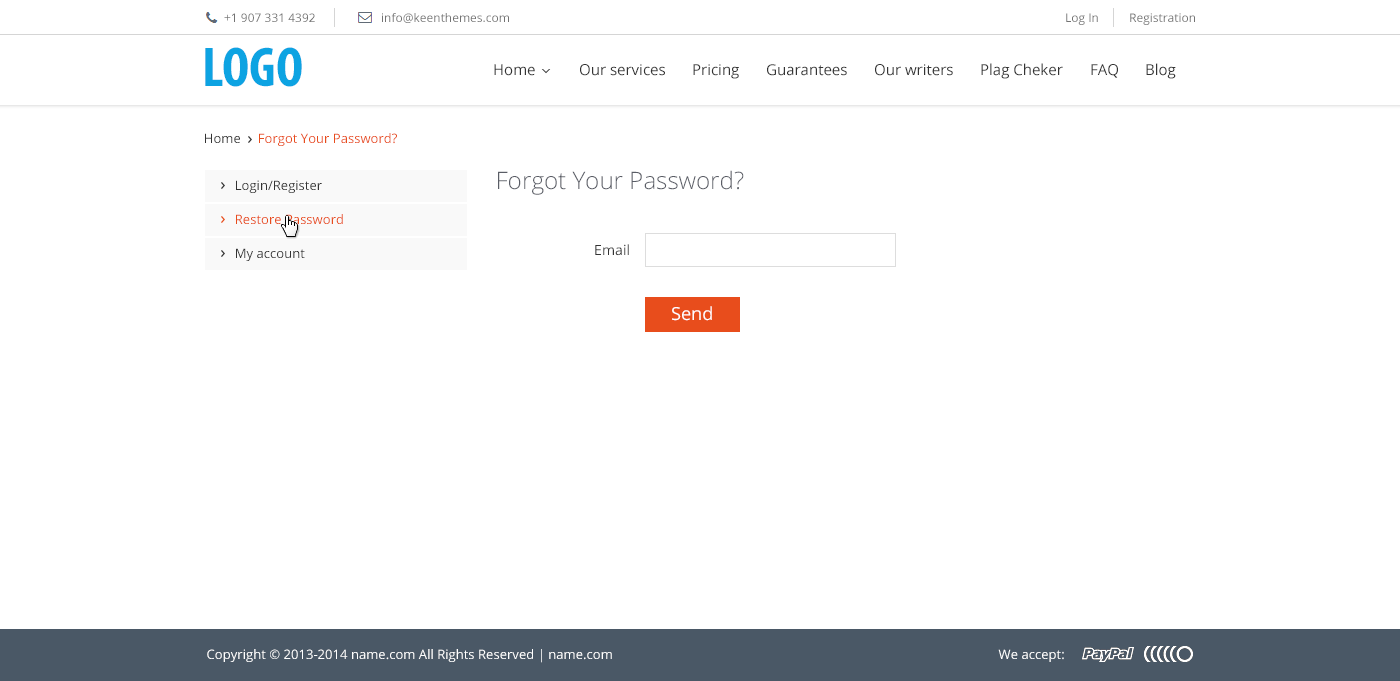
<style>
.page{position:relative;width:1400px;height:681px;background:#ffffff}
.page>*{position:absolute;margin:0}
.t1{font:12px "OpenSans";color:#737373}
.t2{font:56.6px "MyriadPro-BoldCond";color:#0da3e2}
.t3{font:15px "OpenSans";color:#333333}
.t4{font:13px "OpenSans";color:#e84d1c}
.t5{font:13px "OpenSans";color:#333333}
.t6{font:24px "OpenSans-Light";color:#5a5d66}
.t7{font:14px "OpenSans";color:#333333}
.t8{font:18px "OpenSans";color:#ffffff}
</style>
<div class="page">
<p class="t1" style="left:224px;top:13px;width:91px;height:9px">+1 907 331 4392</p>
<p class="t1" style="left:382px;top:13px;width:127px;height:10px">info@keenthemes.com</p>
<p class="t1" style="left:1066px;top:13px;width:32px;height:12px">Log In</p>
<p class="t1" style="left:1130px;top:13px;width:65px;height:12px">Registration</p>
<p class="t2" style="left:205px;top:47px;width:97px;height:40px">LOGO</p>
<p class="t3" style="left:494px;top:64px;width:41px;height:12px">Home</p>
<p class="t3" style="left:580px;top:64px;width:85px;height:12px">Our services</p>
<p class="t3" style="left:693px;top:64px;width:46px;height:15px">Pricing</p>
<p class="t3" style="left:767px;top:64px;width:80px;height:12px">Guarantees</p>
<p class="t3" style="left:875px;top:64px;width:78px;height:12px">Our writers</p>
<p class="t3" style="left:981px;top:63px;width:82px;height:16px">Plag Cheker</p>
<p class="t3" style="left:1091px;top:64px;width:27px;height:14px">FAQ</p>
<p class="t3" style="left:1146px;top:63px;width:30px;height:16px">Blog</p>
<p class="t4" style="left:205px;top:133px;width:192px;height:13px"><span class="t5">Home     </span>Forgot Your Password?</p>
<p class="t6" style="left:498px;top:170px;width:246px;height:25px">Forgot Your Password?</p>
<p class="t5" style="left:236px;top:180px;width:86px;height:13px">Login/Register</p>
<p class="t4" style="left:236px;top:214px;width:107px;height:10px">Restore Password</p>
<p class="t7" style="left:595px;top:244px;width:34px;height:12px">Email</p>
<p class="t5" style="left:236px;top:248px;width:69px;height:13px">My account</p>
<p class="t8" style="left:672px;top:306px;width:40px;height:15px">Send</p>
</div>
